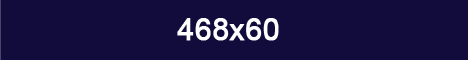
<style>
.page{position:relative;width:468px;height:60px;background:#110c3c}
.page>*{position:absolute;margin:0}
.t1{font:30px "ArialMT";color:#ffffff;font-weight:bold}
</style>
<div class="page">
<p class="t1" style="left:177px;top:18px;width:102px;height:23px">468x60</p>
</div>
